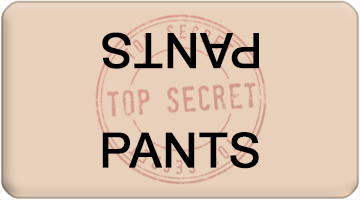
<style>
.page{position:relative;width:360px;height:200px;background:#e8d0bb}
.page>*{position:absolute;margin:0}
.t1{font:48px "ArialMT";color:#000000;font-weight:bold}
</style>
<div class="page">
<p class="t1" style="left:102px;top:32px;width:157px;height:37px;rotate:180deg">PANTS</p>
<p class="t1" style="left:102px;top:132px;width:157px;height:37px">PANTS</p>
</div>
